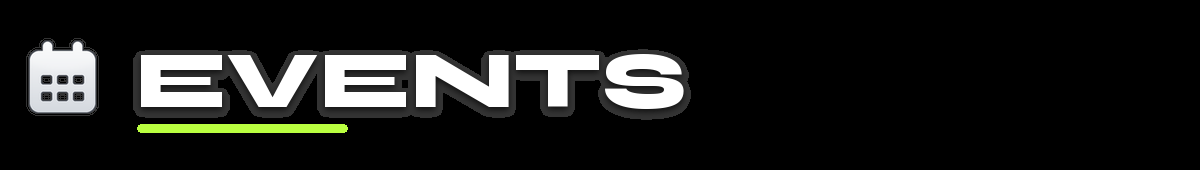
<style>
.page{position:relative;width:1200px;height:170px;background:#000000}
.page>*{position:absolute;margin:0}
.t1{font:80px "Syne-ExtraBold";color:#ffffff}
</style>
<div class="page">
<p class="t1" style="left:141px;top:54px;width:543px;height:55px">EVENTS</p>
</div>
